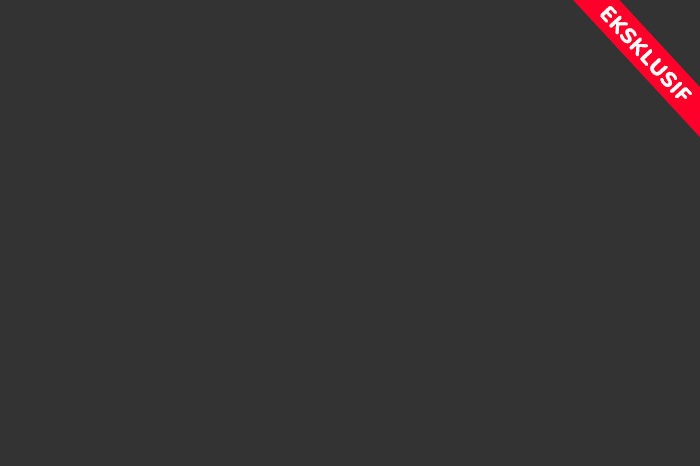
<style>
.page{position:relative;width:700px;height:466px;background:#333333}
.page>*{position:absolute;margin:0}
.t1{font:21.1px "Nunito-ExtraBold";letter-spacing:0.05em;color:#feffff;text-transform:uppercase}
</style>
<div class="page">
<p class="t1" style="left:600px;top:6px;width:92px;height:93px;rotate:47deg">eksklusif</p>
</div>
